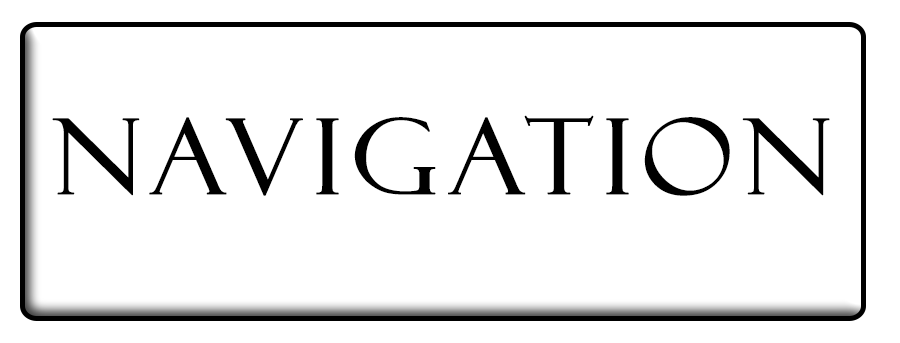
<style>
.page{position:relative;width:900px;height:343px;background:#ffffff}
.page>*{position:absolute;margin:0}
.t1{font:104.2px "FelixTitlingMT";letter-spacing:0.06em;color:#000000;font-weight:bold;scale:1.08 1}
</style>
<div class="page">
<p class="t1" style="left:52px;top:115px;width:778px;height:81px">navigation</p>
</div>
